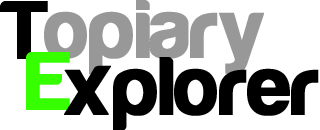
<style>
.page{position:relative;width:320px;height:130px;background:#ffffff}
.page>*{position:absolute;margin:0}
.t1{font:85px "Harabara-Bold";color:#000000;font-weight:bold}
.t2{font:85px "Harabara-Bold";color:#989898;font-weight:bold}
.t3{font:85px "Harabara-Bold";color:#36ff00;font-weight:bold}
</style>
<div class="page">
<p class="t1" style="left:0px;top:1px;width:48px;height:58px">T</p>
<p class="t2" style="left:44px;top:0px;width:220px;height:75px">opiary</p>
<p class="t3" style="left:26px;top:52px;width:44px;height:58px">E</p>
<p class="t1" style="left:64px;top:57px;width:255px;height:75px">xplorer</p>
</div>
